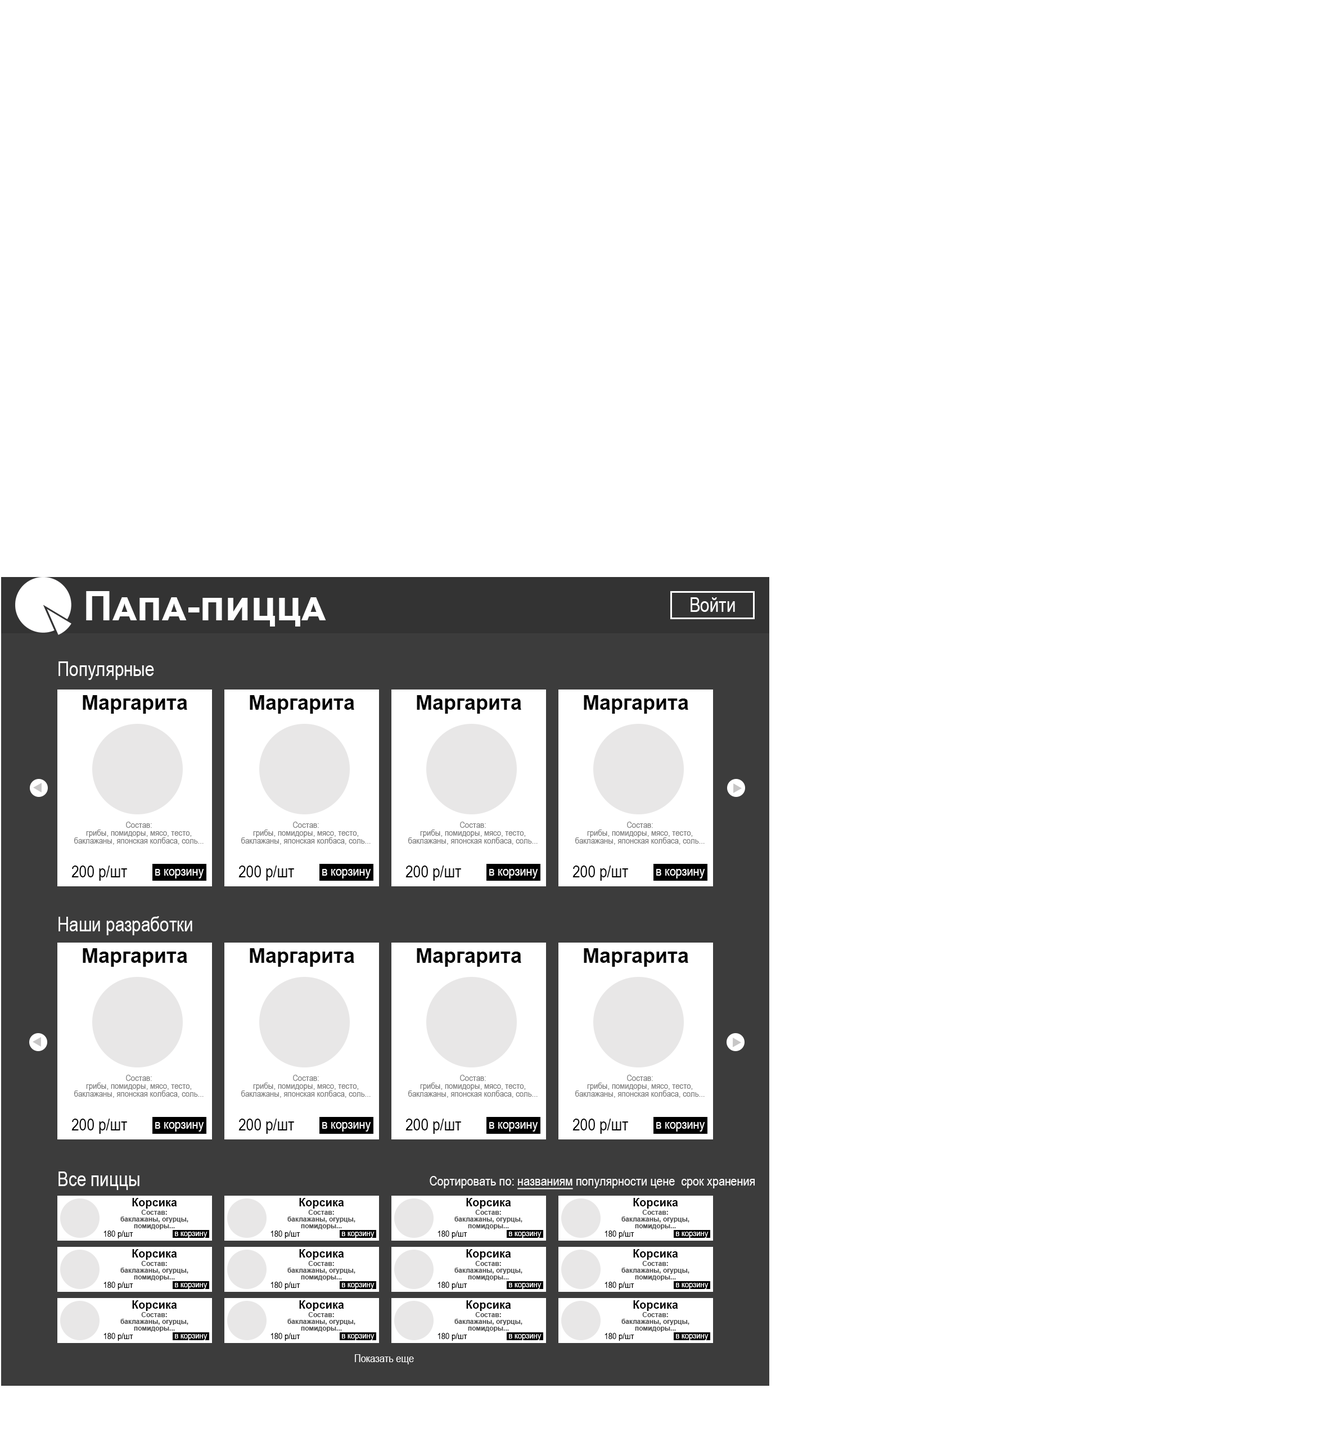
<style>
.page{position:relative;width:1344px;height:1442px;background:#ffffff}
.page>*{position:absolute;margin:0}
.t1{font:40.5px "Arial-BoldMT";color:#ffffff;font-variant:small-caps}
.t2{font:20.2px "ArialNarrow";color:#ffffff}
.t3{font:20.2px "Arial-BoldMT";color:#000000}
.t4{font:9px/7.9px "ArialNarrow";color:#7b7b7b}
.t5{font:16.9px "ArialNarrow";color:#000000}
.t6{font:13.5px "ArialNarrow";color:#ffffff}
.t7{font:20.3px "ArialNarrow";color:#ffffff}
.t8{font:13.5px "ArialNarrow";color:#ffffff;text-decoration:underline}
.t9{font:11.2px "Arial-BoldMT";color:#000000}
.t10{font:6.8px/6.8px "Arial-BoldMT";color:#474747}
.t11{font:9px "ArialNarrow";color:#000000}
.t12{font:9px "ArialNarrow";color:#ffffff}
.t13{font:11.2px "ArialNarrow";color:#ffffff}
</style>
<div class="page">
<p class="t1" style="left:86px;top:591px;width:240px;height:36px">Папа-пицца</p>
<p class="t2" style="left:691px;top:597px;width:44px;height:15px">Войти</p>
<p class="t2" style="left:58px;top:662px;width:96px;height:18px">Популярные</p>
<p class="t3" style="left:83px;top:695px;width:104px;height:19px">Маргарита</p>
<p class="t3" style="left:250px;top:695px;width:104px;height:19px">Маргарита</p>
<p class="t3" style="left:417px;top:695px;width:104px;height:19px">Маргарита</p>
<p class="t3" style="left:584px;top:695px;width:104px;height:19px">Маргарита</p>
<p class="t4" style="left:74px;top:822px;width:130px;height:23px;text-align:center">Состав:<br>грибы, помидоры, мясо, тесто, баклажаны, японская колбаса, соль...</p>
<p class="t4" style="left:241px;top:822px;width:130px;height:23px;text-align:center">Состав:<br>грибы, помидоры, мясо, тесто, баклажаны, японская колбаса, соль...</p>
<p class="t4" style="left:408px;top:822px;width:130px;height:23px;text-align:center">Состав:<br>грибы, помидоры, мясо, тесто, баклажаны, японская колбаса, соль...</p>
<p class="t4" style="left:575px;top:822px;width:130px;height:23px;text-align:center">Состав:<br>грибы, помидоры, мясо, тесто, баклажаны, японская колбаса, соль...</p>
<p class="t5" style="left:71px;top:866px;width:56px;height:15px">200 р/шт</p>
<p class="t6" style="left:155px;top:869px;width:49px;height:10px">в корзину</p>
<p class="t5" style="left:238px;top:866px;width:56px;height:15px">200 р/шт</p>
<p class="t6" style="left:322px;top:869px;width:49px;height:10px">в корзину</p>
<p class="t5" style="left:406px;top:866px;width:55px;height:15px">200 р/шт</p>
<p class="t6" style="left:489px;top:869px;width:49px;height:10px">в корзину</p>
<p class="t5" style="left:573px;top:866px;width:55px;height:15px">200 р/шт</p>
<p class="t6" style="left:656px;top:869px;width:49px;height:10px">в корзину</p>
<p class="t2" style="left:58px;top:916px;width:134px;height:19px">Наши разработки</p>
<p class="t3" style="left:83px;top:948px;width:104px;height:19px">Маргарита</p>
<p class="t3" style="left:250px;top:948px;width:104px;height:19px">Маргарита</p>
<p class="t3" style="left:417px;top:948px;width:104px;height:19px">Маргарита</p>
<p class="t3" style="left:584px;top:948px;width:104px;height:19px">Маргарита</p>
<p class="t4" style="left:74px;top:1075px;width:130px;height:23px;text-align:center">Состав:<br>грибы, помидоры, мясо, тесто, баклажаны, японская колбаса, соль...</p>
<p class="t4" style="left:241px;top:1075px;width:130px;height:23px;text-align:center">Состав:<br>грибы, помидоры, мясо, тесто, баклажаны, японская колбаса, соль...</p>
<p class="t4" style="left:408px;top:1075px;width:130px;height:23px;text-align:center">Состав:<br>грибы, помидоры, мясо, тесто, баклажаны, японская колбаса, соль...</p>
<p class="t4" style="left:575px;top:1075px;width:130px;height:23px;text-align:center">Состав:<br>грибы, помидоры, мясо, тесто, баклажаны, японская колбаса, соль...</p>
<p class="t5" style="left:71px;top:1119px;width:56px;height:15px">200 р/шт</p>
<p class="t5" style="left:238px;top:1119px;width:56px;height:15px">200 р/шт</p>
<p class="t5" style="left:406px;top:1119px;width:55px;height:15px">200 р/шт</p>
<p class="t5" style="left:573px;top:1119px;width:55px;height:15px">200 р/шт</p>
<p class="t6" style="left:155px;top:1122px;width:49px;height:10px">в корзину</p>
<p class="t6" style="left:322px;top:1122px;width:49px;height:10px">в корзину</p>
<p class="t6" style="left:489px;top:1122px;width:49px;height:10px">в корзину</p>
<p class="t6" style="left:656px;top:1122px;width:49px;height:10px">в корзину</p>
<p class="t7" style="left:58px;top:1172px;width:82px;height:18px">Все пиццы</p>
<p class="t6" style="left:430px;top:1176px;width:325px;height:14px">Сортировать по: <span class="t8">названиям</span> популярности цене  срок хранения</p>
<p class="t9" style="left:132px;top:1198px;width:45px;height:11px">Корсика</p>
<p class="t9" style="left:299px;top:1198px;width:45px;height:11px">Корсика</p>
<p class="t9" style="left:466px;top:1198px;width:45px;height:11px">Корсика</p>
<p class="t9" style="left:633px;top:1198px;width:45px;height:11px">Корсика</p>
<p class="t10" style="left:120px;top:1210px;width:68px;height:20px;text-align:center">Состав:<br>баклажаны, огурцы, помидоры...</p>
<p class="t10" style="left:287px;top:1210px;width:69px;height:20px;text-align:center">Состав:<br>баклажаны, огурцы, помидоры...</p>
<p class="t10" style="left:454px;top:1210px;width:69px;height:20px;text-align:center">Состав:<br>баклажаны, огурцы, помидоры...</p>
<p class="t10" style="left:622px;top:1210px;width:68px;height:20px;text-align:center">Состав:<br>баклажаны, огурцы, помидоры...</p>
<p class="t11" style="left:104px;top:1231px;width:29px;height:8px">180 р/шт</p>
<p class="t12" style="left:175px;top:1232px;width:33px;height:6px">в корзину</p>
<p class="t11" style="left:271px;top:1231px;width:29px;height:8px">180 р/шт</p>
<p class="t12" style="left:342px;top:1232px;width:33px;height:6px">в корзину</p>
<p class="t11" style="left:438px;top:1231px;width:29px;height:8px">180 р/шт</p>
<p class="t12" style="left:509px;top:1232px;width:33px;height:6px">в корзину</p>
<p class="t11" style="left:605px;top:1231px;width:29px;height:8px">180 р/шт</p>
<p class="t12" style="left:676px;top:1232px;width:33px;height:6px">в корзину</p>
<p class="t9" style="left:132px;top:1249px;width:45px;height:11px">Корсика</p>
<p class="t9" style="left:299px;top:1249px;width:45px;height:11px">Корсика</p>
<p class="t9" style="left:466px;top:1249px;width:45px;height:11px">Корсика</p>
<p class="t9" style="left:633px;top:1249px;width:45px;height:11px">Корсика</p>
<p class="t10" style="left:120px;top:1261px;width:68px;height:20px;text-align:center">Состав:<br>баклажаны, огурцы, помидоры...</p>
<p class="t10" style="left:287px;top:1261px;width:69px;height:20px;text-align:center">Состав:<br>баклажаны, огурцы, помидоры...</p>
<p class="t10" style="left:454px;top:1261px;width:69px;height:20px;text-align:center">Состав:<br>баклажаны, огурцы, помидоры...</p>
<p class="t10" style="left:622px;top:1261px;width:68px;height:20px;text-align:center">Состав:<br>баклажаны, огурцы, помидоры...</p>
<p class="t11" style="left:104px;top:1282px;width:29px;height:8px">180 р/шт</p>
<p class="t12" style="left:175px;top:1283px;width:33px;height:6px">в корзину</p>
<p class="t11" style="left:271px;top:1282px;width:29px;height:8px">180 р/шт</p>
<p class="t12" style="left:342px;top:1283px;width:33px;height:6px">в корзину</p>
<p class="t11" style="left:438px;top:1282px;width:29px;height:8px">180 р/шт</p>
<p class="t12" style="left:509px;top:1283px;width:33px;height:6px">в корзину</p>
<p class="t11" style="left:605px;top:1282px;width:29px;height:8px">180 р/шт</p>
<p class="t12" style="left:676px;top:1283px;width:33px;height:6px">в корзину</p>
<p class="t9" style="left:132px;top:1300px;width:45px;height:11px">Корсика</p>
<p class="t9" style="left:299px;top:1300px;width:45px;height:11px">Корсика</p>
<p class="t9" style="left:466px;top:1300px;width:45px;height:11px">Корсика</p>
<p class="t9" style="left:633px;top:1300px;width:45px;height:11px">Корсика</p>
<p class="t10" style="left:120px;top:1312px;width:68px;height:20px;text-align:center">Состав:<br>баклажаны, огурцы, помидоры...</p>
<p class="t10" style="left:287px;top:1312px;width:69px;height:20px;text-align:center">Состав:<br>баклажаны, огурцы, помидоры...</p>
<p class="t10" style="left:454px;top:1312px;width:69px;height:20px;text-align:center">Состав:<br>баклажаны, огурцы, помидоры...</p>
<p class="t10" style="left:622px;top:1312px;width:68px;height:20px;text-align:center">Состав:<br>баклажаны, огурцы, помидоры...</p>
<p class="t11" style="left:104px;top:1333px;width:29px;height:8px">180 р/шт</p>
<p class="t12" style="left:175px;top:1334px;width:33px;height:6px">в корзину</p>
<p class="t11" style="left:271px;top:1333px;width:29px;height:8px">180 р/шт</p>
<p class="t12" style="left:342px;top:1334px;width:33px;height:6px">в корзину</p>
<p class="t11" style="left:438px;top:1333px;width:29px;height:8px">180 р/шт</p>
<p class="t12" style="left:509px;top:1334px;width:33px;height:6px">в корзину</p>
<p class="t11" style="left:605px;top:1333px;width:29px;height:8px">180 р/шт</p>
<p class="t12" style="left:676px;top:1334px;width:33px;height:6px">в корзину</p>
<p class="t13" style="left:355px;top:1354px;width:59px;height:11px">Показать еще</p>
</div>
